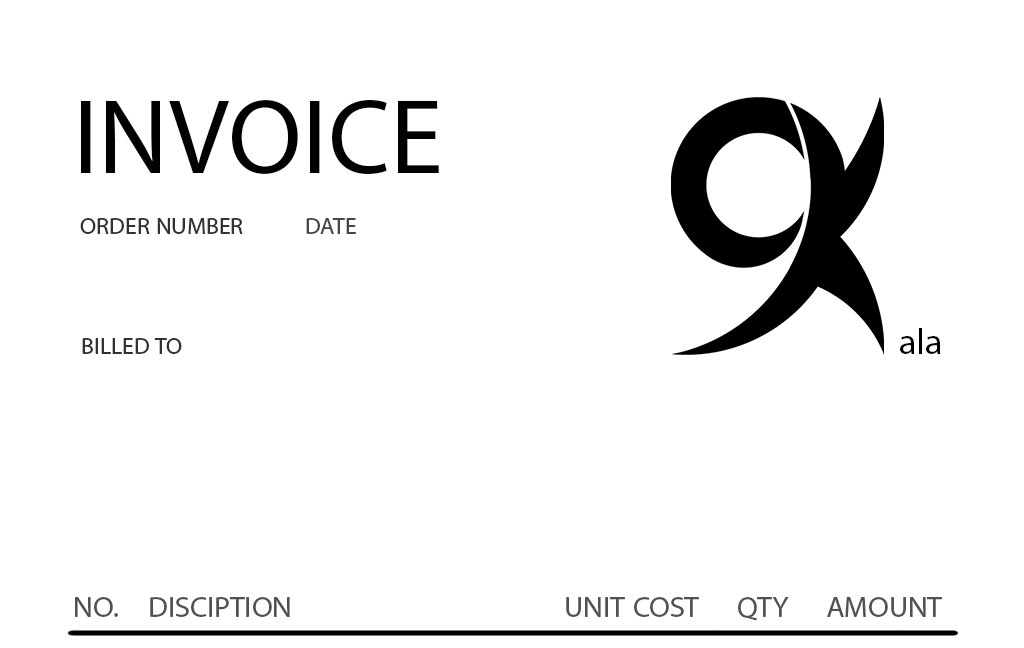
<style>
.page{position:relative;width:1024px;height:648px;background:#ffffff}
.page>*{position:absolute;margin:0}
.t1{font:150px "MyriadArabic-Regular";color:#010101}
.t2{font:33.3px "MyriadArabic-Regular";color:#303233}
.t3{font:33.3px "MyriadArabic-Regular";color:#464748}
.t4{font:50px "MyriadArabic-Regular";color:#000000}
.t5{font:41.7px "MyriadArabic-Regular";color:#4f5152}
</style>
<div class="page">
<p class="t1" style="left:81px;top:99px;width:358px;height:75px">INVOICE</p>
<p class="t2" style="left:80px;top:218px;width:163px;height:16px">ORDER NUMBER</p>
<p class="t3" style="left:306px;top:218px;width:50px;height:16px">DATE</p>
<p class="t4" style="left:900px;top:328px;width:41px;height:26px">ala</p>
<p class="t2" style="left:82px;top:338px;width:100px;height:16px">BILLED TO</p>
<p class="t5" style="left:75px;top:597px;width:43px;height:20px">.NO</p>
<p class="t5" style="left:150px;top:597px;width:140px;height:20px">DISCIPTION</p>
<p class="t5" style="left:566px;top:597px;width:133px;height:20px">UNIT COST</p>
<p class="t5" style="left:738px;top:597px;width:51px;height:24px">QTY</p>
<p class="t5" style="left:827px;top:597px;width:115px;height:20px">AMOUNT</p>
</div>
